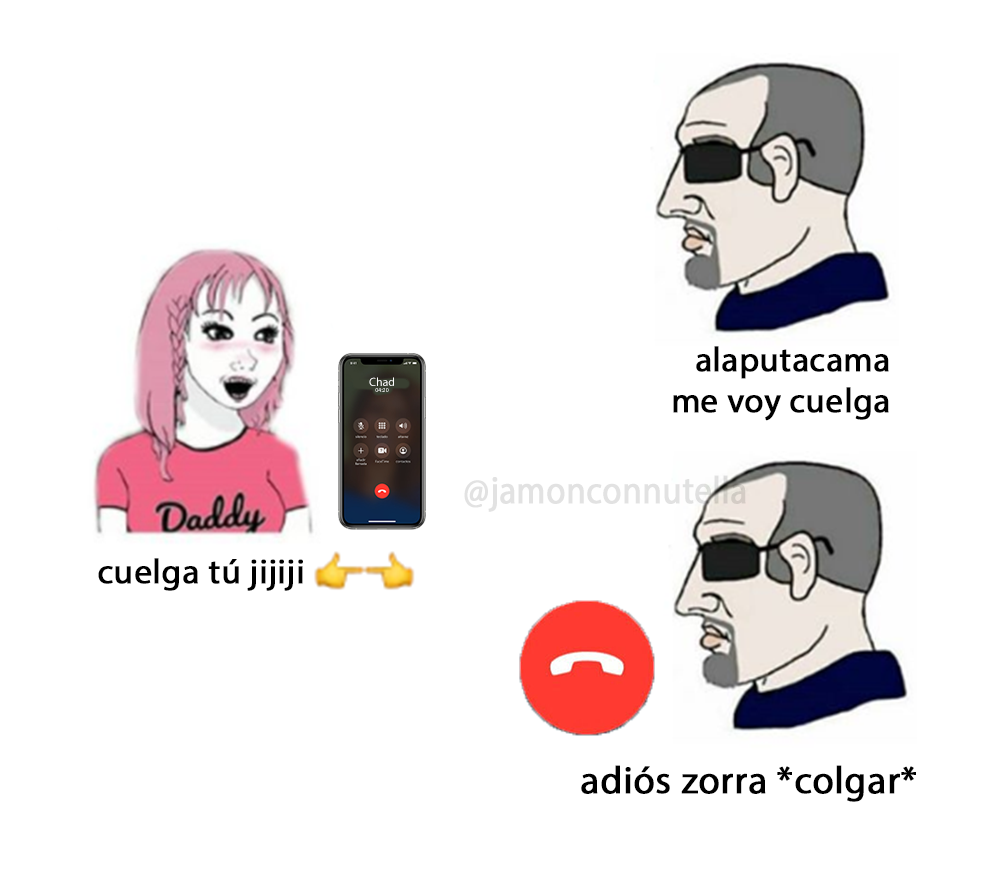
<style>
.page{position:relative;width:1000px;height:878px;background:#ffffff}
.page>*{position:absolute;margin:0}
.t1{font:34.7px "MyriadPro-Regular";color:#000000;font-weight:bold}
.t2{font:11.9px "MyriadPro-Regular";color:#ffffff}
.t3{font:5.9px "MyriadPro-Regular"}
.t4{font:38.7px "MyriadPro-Regular";color:#e2e2e2;font-weight:bold;scale:0.89 1}
.t5{font:38.7px "MyriadPro-Regular";color:#000000;font-weight:bold}
</style>
<div class="page">
<p class="t1" style="left:673px;top:346px;width:216px;height:75px;text-align:right">alaputacama<br>me voy cuelga</p>
<p class="t2" style="left:369px;top:377px;width:25px;height:9px">Chad</p>
<p class="t3" style="left:375px;top:388px;width:14px;height:4px">04:20</p>
<p class="t4" style="left:464px;top:475px;width:282px;height:37px">@jamonconnutella</p>
<p class="t1" style="left:98px;top:558px;width:205px;height:33px">cuelga tú jijiji</p>
<p class="t5" style="left:581px;top:765px;width:335px;height:37px">adiós zorra *colgar*</p>
</div>
